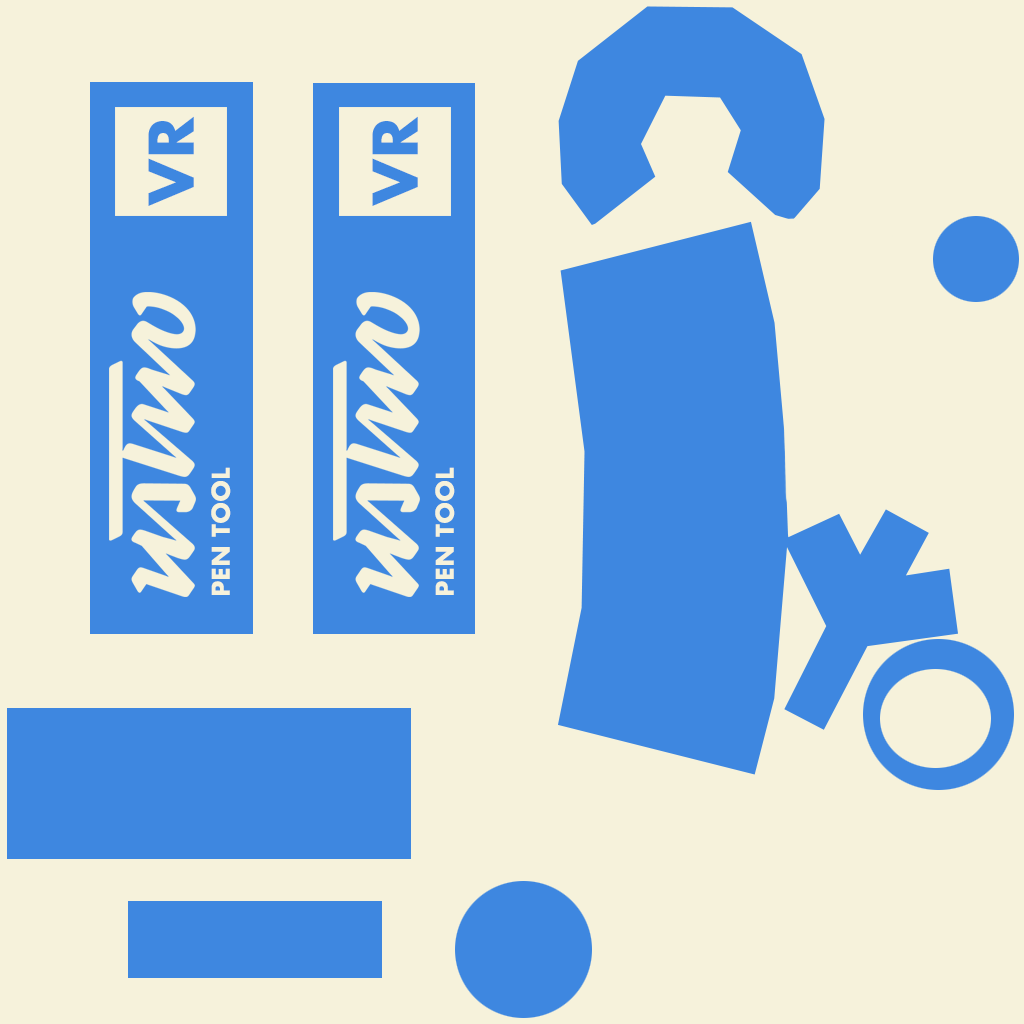
<style>
.page{position:relative;width:1024px;height:1024px;background:#f6f2db}
.page>*{position:absolute;margin:0}
.t1{font:60px "Futura-Bold";color:#3e87e0}
.t2{font:24px "Futura-Bold";color:#f6f2db}
</style>
<div class="page">
<p class="t1" style="left:148px;top:116px;width:46px;height:90px;rotate:-90deg">VR</p>
<p class="t1" style="left:372px;top:116px;width:46px;height:90px;rotate:-90deg">VR</p>
<p class="t2" style="left:211px;top:467px;width:20px;height:128px;rotate:-90deg">PEN TOOL</p>
<p class="t2" style="left:435px;top:467px;width:20px;height:128px;rotate:-90deg">PEN TOOL</p>
</div>
